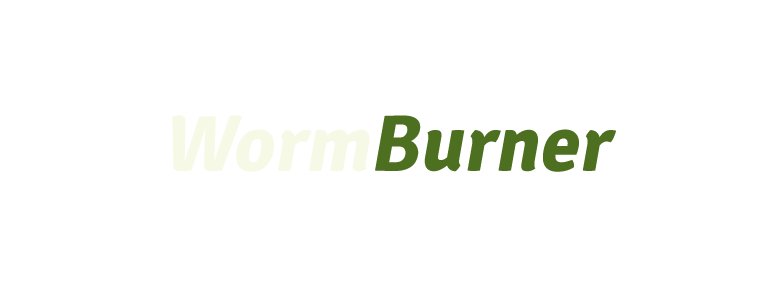
<style>
.page{position:relative;width:780px;height:300px;background:#ffffff}
.page>*{position:absolute;margin:0}
.t1{font:80px "Signika-Bold";color:#4d6f20;font-style:italic}
.t2{font:80px "Signika-Bold";color:#f6f9e5;font-style:italic}
</style>
<div class="page">
<p class="t1" style="left:172px;top:115px;width:444px;height:57px"><span class="t2">Worm</span>Burner</p>
</div>
